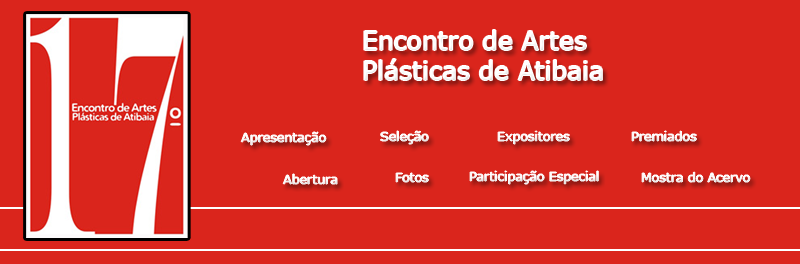
<style>
.page{position:relative;width:800px;height:264px;background:#da251c}
.page>*{position:absolute;margin:0}
.t1{font:25px "MSReferenceSansSerif";color:#ffffff}
.t2{font:12.5px "MSReferenceSansSerif";color:#ffffff}
</style>
<div class="page">
<p class="t1" style="left:364px;top:30px;width:238px;height:50px">Encontro de Artes<br>Plásticas de Atibaia</p>
<p class="t2" style="left:241px;top:132px;width:85px;height:13px">Apresentação</p>
<p class="t2" style="left:380px;top:131px;width:49px;height:13px">Seleção</p>
<p class="t2" style="left:498px;top:131px;width:72px;height:13px">Expositores</p>
<p class="t2" style="left:632px;top:131px;width:65px;height:10px">Premiados</p>
<p class="t2" style="left:283px;top:174px;width:54px;height:10px">Abertura</p>
<p class="t2" style="left:396px;top:173px;width:33px;height:9px">Fotos</p>
<p class="t2" style="left:470px;top:171px;width:129px;height:13px">Participação Especial</p>
<p class="t2" style="left:642px;top:172px;width:108px;height:10px">Mostra do Acervo</p>
</div>
